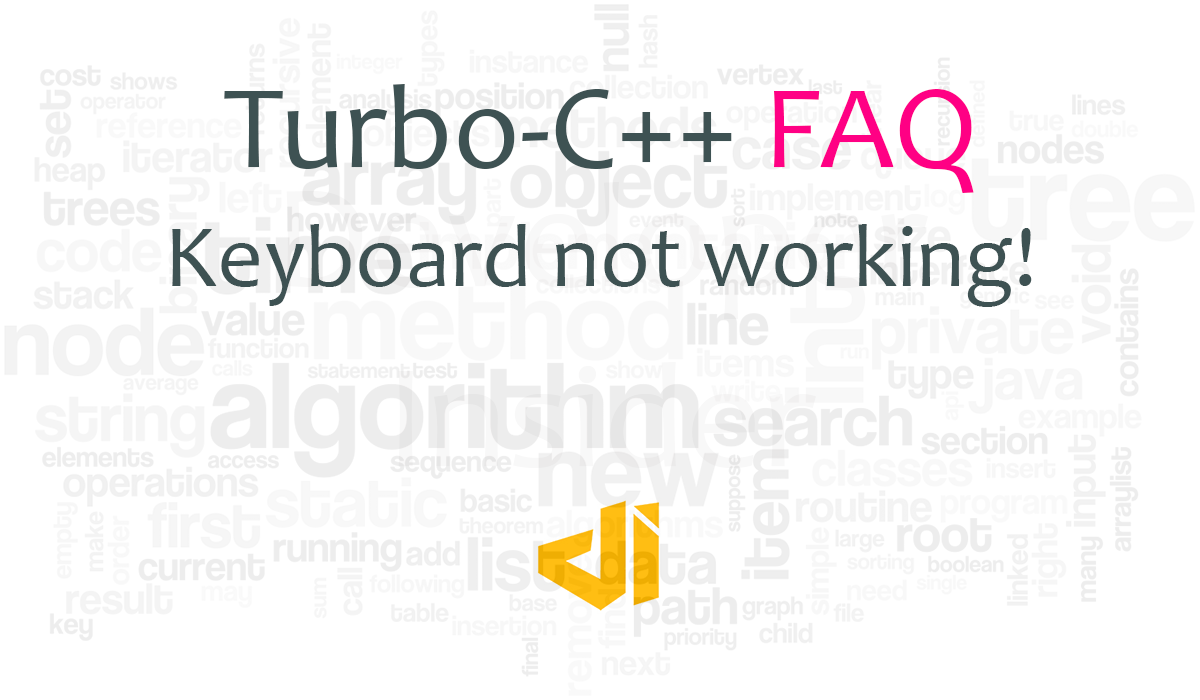
<style>
.page{position:relative;width:1200px;height:700px;background:#ffffff}
.page>*{position:absolute;margin:0}
.t1{font:120px "Candara";color:#3e5253}
.t2{font:120px "Candara";color:#ff0084}
.t3{font:90px "Candara";color:#3e5253}
</style>
<div class="page">
<p class="t1" style="left:224px;top:84px;width:750px;height:109px">Turbo-C++ <span class="t2">FAQ</span></p>
<p class="t3" style="left:172px;top:224px;width:860px;height:83px">Keyboard not working!</p>
</div>
